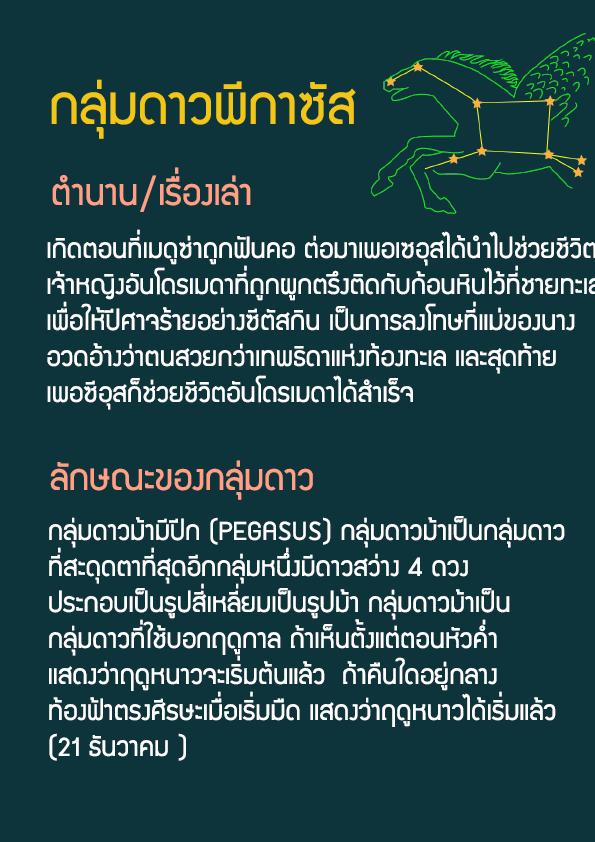
<style>
.page{position:relative;width:595px;height:842px;background:#0e343b}
.page>*{position:absolute;margin:0}
.t1{font:60px "supermarket";color:#f2c614}
.t2{font:40px "supermarket";color:#ff9f86}
.t3{font:30px "supermarket";color:#ffffff}
</style>
<div class="page">
<p class="t1" style="left:51px;top:79px;width:305px;height:60px">กลุ่มดาวพีกาซัส</p>
<p class="t2" style="left:52px;top:167px;width:199px;height:45px">ตำนาน/เรื่องเล่า</p>
<p class="t2" style="left:50px;top:460px;width:263px;height:40px">ลักษณะของกลุ่มดาว</p>
<p class="t3" style="left:49px;top:516px;width:516px;height:245px">กลุ่มดาวม้ามีปีก (PEGASUS) กลุ่มดาวม้าเป็นกลุ่มดาว<br>ที่สะดุดตาที่สุดอีกกลุ่มหนึ่งมีดาวสว่าง 4 ดวง <br>ประกอบเป็นรูปสี่เหลี่ยมเป็นรูปม้า กลุ่มดาวม้าเป็น<br>กลุ่มดาวที่ใช้บอกฤดูกาล ถ้าเห็นตั้งแต่ตอนหัวค่ำ<br>แสดงว่าฤดูหนาวจะเริ่มต้นแล้ว  ถ้าคืนใดอยู่กลาง <br>ท้องฟ้าตรงศีรษะเมื่อเริ่มมืด แสดงว่าฤดูหนาวได้เริ่มแล้ว <br>(21 ธันวาคม )</p>
</div>
